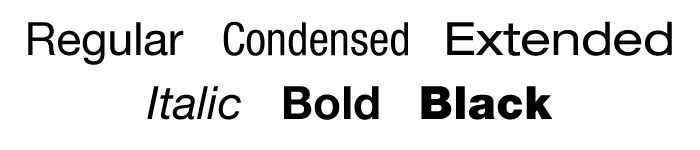
<style>
.page{position:relative;width:700px;height:150px;background:#ffffff}
.page>*{position:absolute;margin:0}
.t1{font:46px/64px "HelveticaNeueLT-Condensed";color:#000000}
.t2{font:46px/64px "HelveticaNeueLT-Roman";color:#000000}
.t3{font:46px/64px "HelveticaNeueLT-Extended";color:#000000}
.t4{font:46px/64px "HelveticaNeueLT-Italic";color:#000000}
.t5{font:46px/64px "HelveticaNeueLT-Bold";color:#000000}
.t6{font:46px/64px "HelveticaNeueLT-Black";color:#000000}
</style>
<div class="page">
<p class="t1" style="left:28px;top:21px;width:644px;height:99px;text-align:center"><span class="t2">Regular   </span>Condensed   <span class="t3">Extended  <br></span><span class="t4">Italic   </span><span class="t5">Bold   </span><span class="t6">Black</span></p>
</div>
